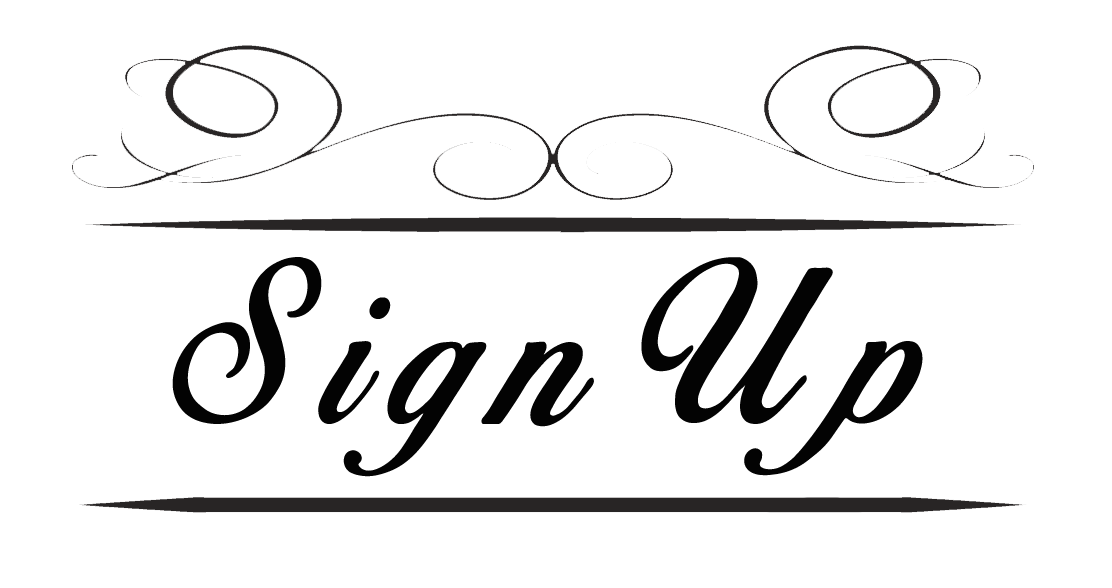
<style>
.page{position:relative;width:1112px;height:588px;background:#ffffff}
.page>*{position:absolute;margin:0}
.t1{font:200px "BirdsofParadise";letter-spacing:0.01em;color:#030303}
</style>
<div class="page">
<p class="t1" style="left:172px;top:257px;width:751px;height:220px">Sign Up</p>
</div>
